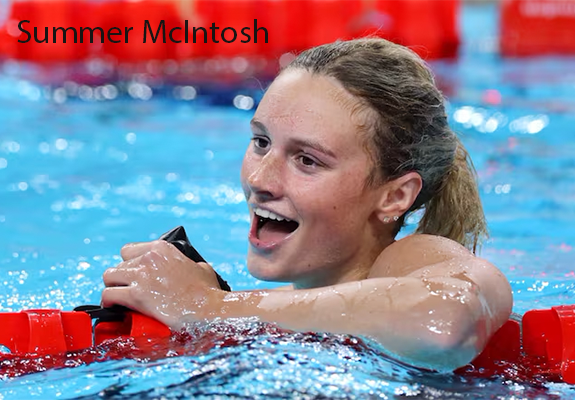
<style>
.page{position:relative;width:575px;height:400px}
.page>*{position:absolute;margin:0}
.t1{font:33.3px "MyriadPro-Regular";color:#181413}
</style>
<div class="page">
<p class="t1" style="left:17px;top:19px;width:251px;height:24px">Summer McIntosh</p>
</div>
